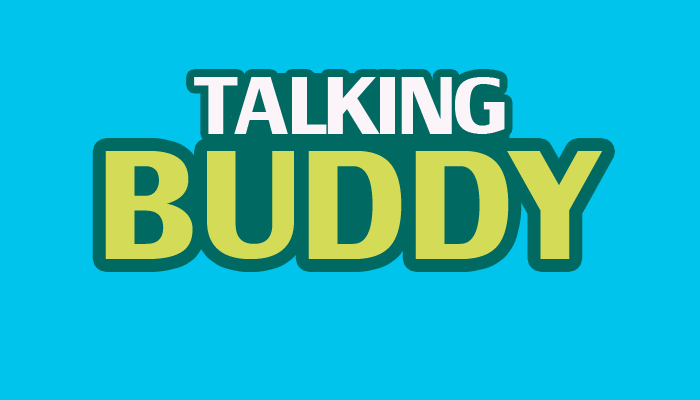
<style>
.page{position:relative;width:700px;height:400px;background:#00c4ec}
.page>*{position:absolute;margin:0}
.t1{font:79px "CommunistSansBold";letter-spacing:-0.1em;color:#ffffff;scale:1.06 1}
.t2{font:150.4px "CommunistSansBold";letter-spacing:-0.08em;color:#d4db57;scale:1.06 1}
</style>
<div class="page">
<p class="t1" style="left:194px;top:77px;width:311px;height:57px">TALKING</p>
<p class="t2" style="left:105px;top:151px;width:88px;height:108px">B</p>
<p class="t2" style="left:207px;top:151px;width:87px;height:108px">U</p>
<p class="t2" style="left:308px;top:151px;width:94px;height:108px">D</p>
<p class="t2" style="left:415px;top:151px;width:94px;height:108px">D</p>
<p class="t2" style="left:507px;top:151px;width:96px;height:108px">Y</p>
</div>
